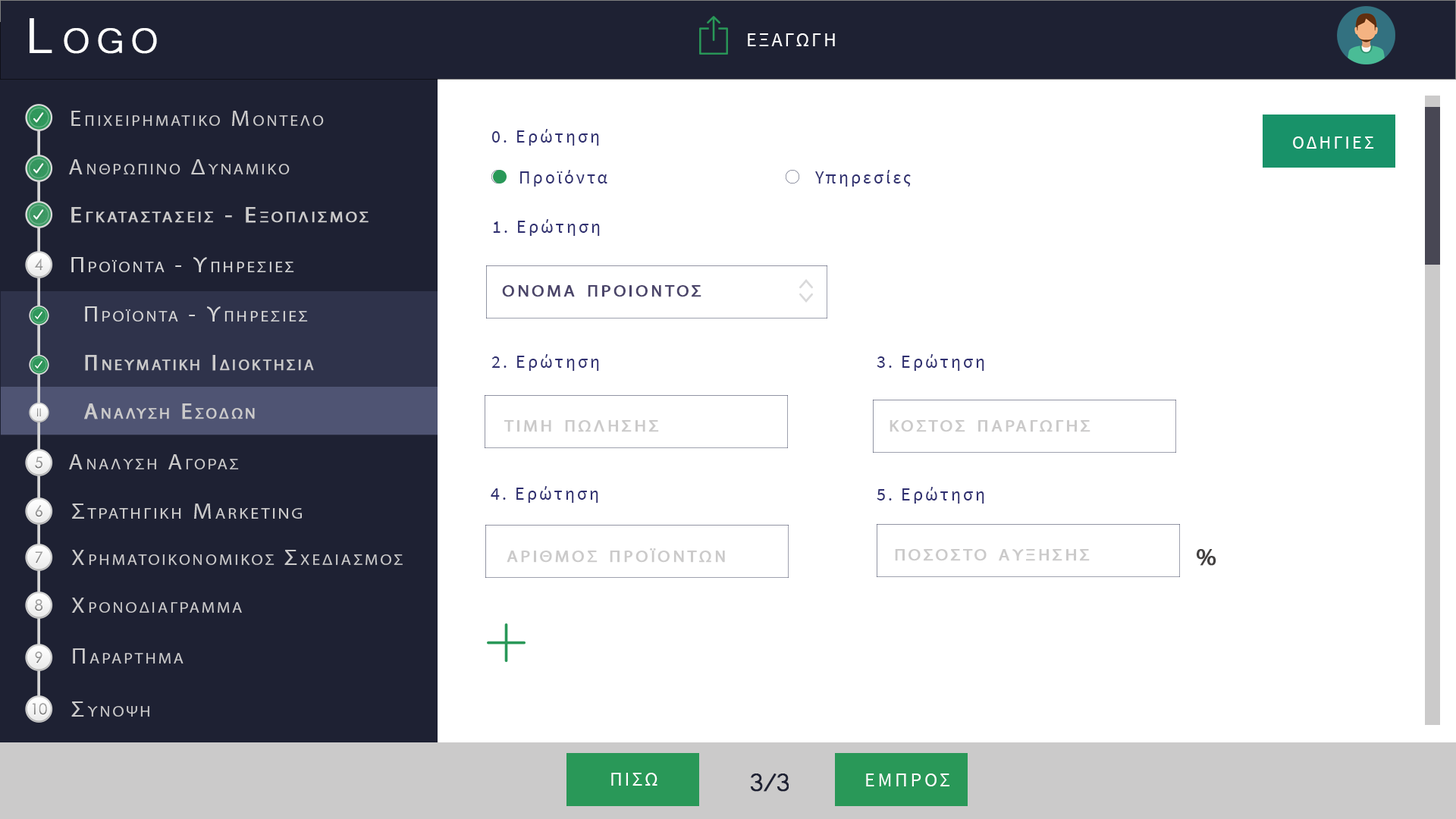
<style>
.page{position:relative;width:1456px;height:819px;background:#ffffff}
.page>*{position:absolute;margin:0}
.t1{font:63.7px "Microsoft-Yi-Baiti";letter-spacing:0.13em;color:#ffffff;font-variant:small-caps;font-weight:bold}
.t2{font:20px "SourceSansPro-Regular";letter-spacing:0.1em;color:#fefefe;text-transform:uppercase}
.t3{font:18.2px "SourceSansPro-Regular";letter-spacing:0.13em;color:#2f2f70}
.t4{font:18.2px "SourceSansPro-Regular";letter-spacing:0.13em;color:#2f2f70;text-transform:uppercase}
.t5{font:18.2px "SourceSansPro-Regular";letter-spacing:0.13em;color:#ffffff;text-transform:uppercase}
.t6{font:23.7px "MyriadPro-Regular";letter-spacing:0.13em;color:#4b456a;font-variant:small-caps;font-weight:bold;scale:1.08 1}
.t7{font:23.7px "MyriadPro-Regular";letter-spacing:0.13em;color:#cbcaca;font-variant:small-caps;font-weight:bold;scale:1.08 1}
.t8{font:23.7px "MyriadPro-Regular";letter-spacing:0.13em;color:#434040;font-variant:small-caps;font-weight:bold;scale:1.08 1}
.t9{font:32.8px "Microsoft-Yi-Baiti";letter-spacing:-0.1em;color:#1e2133;font-weight:bold}
.t10{font:20px "SourceSansPro-Regular";letter-spacing:0.13em;color:#fefefe;text-transform:uppercase}
</style>
<div class="page">
<p class="t1" style="left:30px;top:18px;width:127px;height:36px">Logo</p>
<p class="t2" style="left:748px;top:33px;width:87px;height:13px">εξαγωγη</p>
<p class="t3" style="left:492px;top:129px;width:107px;height:17px"><span class="t4">0. </span>Ερώτηση</p>
<p class="t5" style="left:1293px;top:136px;width:81px;height:13px">Οδηγιεσ</p>
<p class="t3" style="left:520px;top:170px;width:87px;height:17px">Προϊόντα</p>
<p class="t3" style="left:815px;top:170px;width:96px;height:17px">Υπηρεσίες</p>
<p class="t3" style="left:493px;top:219px;width:107px;height:17px"><span class="t4">1. </span>Ερώτηση</p>
<p class="t6" style="left:502px;top:285px;width:199px;height:12px">ονομα προιοντοσ</p>
<p class="t3" style="left:491px;top:354px;width:108px;height:17px"><span class="t4">2. </span>Ερώτηση</p>
<p class="t3" style="left:877px;top:354px;width:107px;height:17px"><span class="t4">3. </span>Ερώτηση</p>
<p class="t7" style="left:504px;top:420px;width:155px;height:12px">τιμη πωλησησ</p>
<p class="t7" style="left:890px;top:420px;width:200px;height:12px">κοστοσ παραγωγησ</p>
<p class="t3" style="left:491px;top:486px;width:107px;height:17px"><span class="t4">4. </span>Ερώτηση</p>
<p class="t3" style="left:877px;top:487px;width:107px;height:17px"><span class="t4">5. </span>Ερώτηση</p>
<p class="t7" style="left:507px;top:548px;width:218px;height:15px">αριθμοσ προϊοντων</p>
<p class="t7" style="left:895px;top:549px;width:195px;height:12px">ποσοστο αυξησησ</p>
<p class="t8" style="left:1197px;top:549px;width:19px;height:17px">%</p>
<p class="t2" style="left:611px;top:773px;width:46px;height:13px">Πισω</p>
<p class="t9" style="left:750px;top:773px;width:39px;height:19px">3/3</p>
<p class="t10" style="left:866px;top:773px;width:83px;height:13px">εμπροσ</p>
</div>
